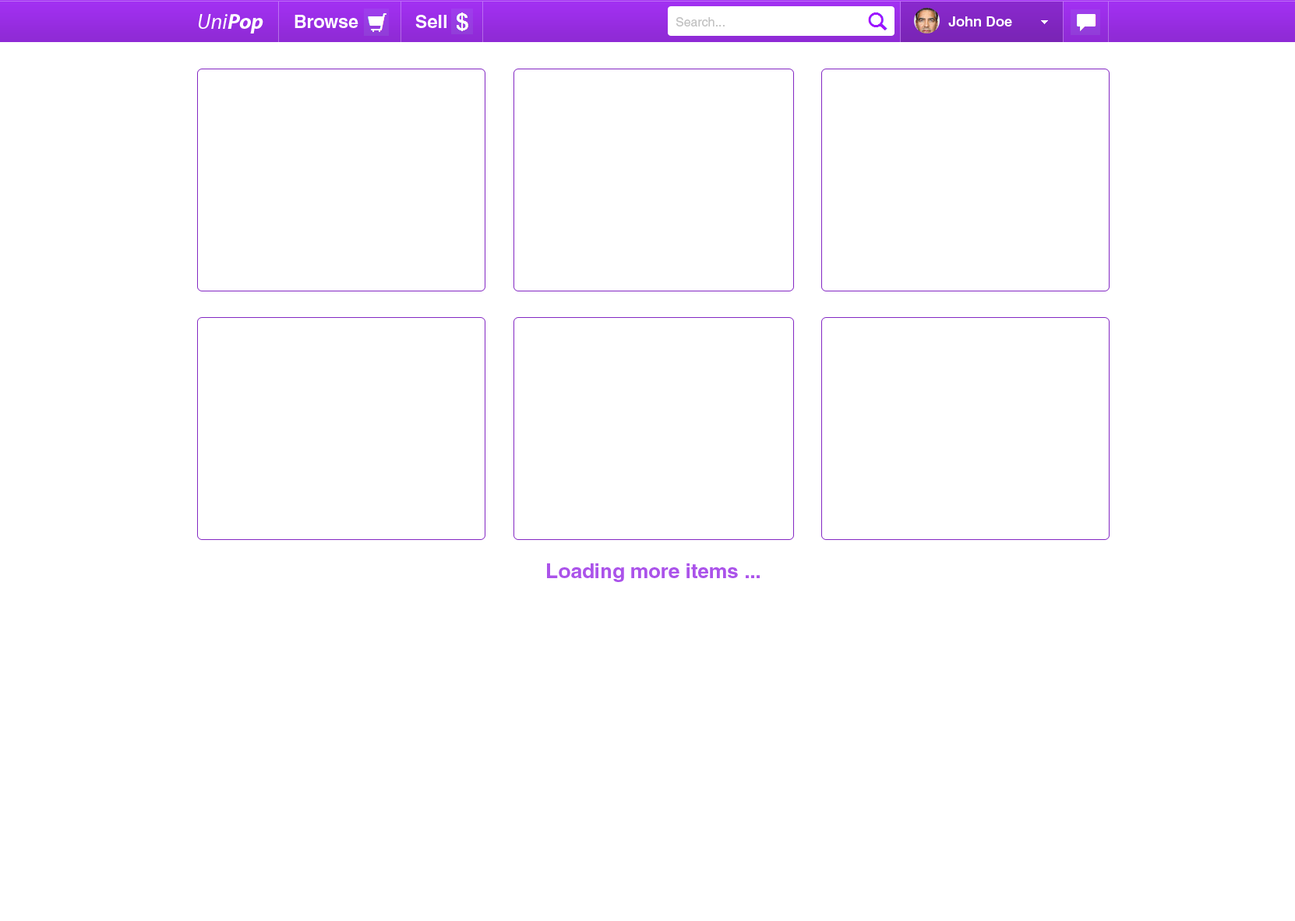
<style>
.page{position:relative;width:1295px;height:921px;background:#ffffff}
.page>*{position:absolute;margin:0}
.t1{font:21.8px "MyriadPro-It";color:#ffffff}
.t2{font:21.8px "MyriadPro-BoldIt";color:#ffffff}
.t3{font:18.1px "Helvetica-Bold";color:#ffffff}
.t4{font:12.5px "Helvetica";color:#c2c2c2}
.t5{font:14px "Helvetica-Bold";color:#ffffff}
.t6{font:20.3px "Helvetica-Bold";color:#ab52ea}
</style>
<div class="page">
<p class="t1" style="left:199px;top:14px;width:64px;height:20px">Uni<span class="t2">Pop</span></p>
<p class="t3" style="left:294px;top:15px;width:64px;height:13px">Browse</p>
<p class="t3" style="left:415px;top:15px;width:31px;height:13px">Sell</p>
<p class="t4" style="left:676px;top:17px;width:49px;height:9px">Search...</p>
<p class="t5" style="left:948px;top:16px;width:64px;height:10px">John Doe</p>
<p class="t6" style="left:547px;top:563px;width:213px;height:19px">Loading more items ...</p>
</div>
